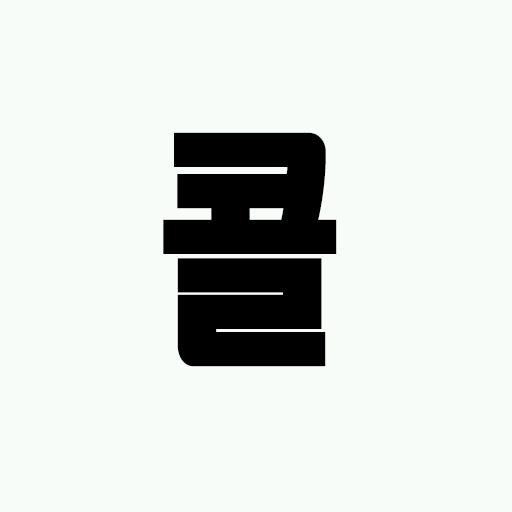
<style>
.page{position:relative;width:512px;height:512px;background:#f8fcf8}
.page>*{position:absolute;margin:0}
.t1{font:248.9px "HeadlineR-HM";color:#000000;scale:0.79 1}
</style>
<div class="page">
<p class="t1" style="left:163px;top:132px;width:174px;height:235px">콜</p>
</div>
